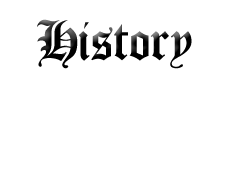
<style>
.page{position:relative;width:230px;height:195px;background:#ffffff}
.page>*{position:absolute;margin:0}
.t1{font:60px "Oldchristmas-Regular";color:#000000}
</style>
<div class="page">
<p class="t1" style="left:37px;top:19px;width:155px;height:50px">History</p>
</div>
